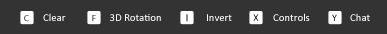
<style>
.page{position:relative;width:387px;height:34px;background:#333333}
.page>*{position:absolute;margin:0}
.t1{font:9px "MyriadPro-Regular"}
.t2{font:10.8px "Calibri";color:#ffffff}
.t3{font:9.6px "Helvetica"}
</style>
<div class="page">
<p class="t1" style="left:24px;top:15px;width:5px;height:7px">C</p>
<p class="t2" style="left:43px;top:13px;width:23px;height:8px">Clear</p>
<p class="t1" style="left:92px;top:15px;width:4px;height:7px">F</p>
<p class="t2" style="left:110px;top:14px;width:51px;height:7px">3D Rotation</p>
<p class="t3" style="left:186px;top:14px;width:2px;height:8px">I</p>
<p class="t2" style="left:207px;top:14px;width:25px;height:7px">Invert</p>
<p class="t1" style="left:253px;top:14px;width:6px;height:7px">X</p>
<p class="t2" style="left:273px;top:13px;width:37px;height:8px">Controls</p>
<p class="t1" style="left:332px;top:14px;width:5px;height:7px">Y</p>
<p class="t2" style="left:350px;top:13px;width:20px;height:8px">Chat</p>
</div>
